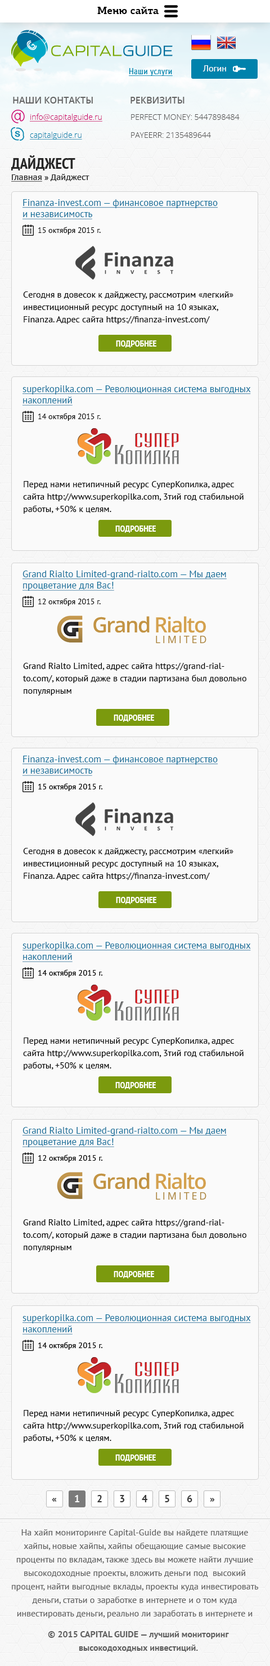
<style>
.page{position:relative;width:270px;height:1666px;background:#fafafa}
.page>*{position:absolute;margin:0}
.t1{font:10.1px "PFCentroSlabPro-Bold";color:#000000}
.t2{font:9px "PTSans-Regular";color:#ffffff}
.t3{font:9px "OpenSans-Semibold";color:#656565;text-transform:uppercase}
.t4{font:7.9px "OpenSans-Light";color:#cb0069;text-decoration:underline}
.t5{font:7.9px "OpenSans-Light";color:#545454}
.t6{font:7.9px "OpenSans-Light";color:#0082ac;text-decoration:underline}
.t7{font:15.2px "PTSans-NarrowBold";color:#262626;text-transform:uppercase}
.t8{font:7.9px "PTSans-Caption";color:#262626}
.t9{font:7.9px "PTSans-Caption";color:#262626;text-decoration:underline}
.t10{font:9.6px "PTSans-Regular";color:#0e6e9a;text-decoration:underline}
.t11{font:7.9px "PTSans-Regular";color:#000000}
.t12{font:9px/12.4px "PTSans-Regular";color:#000000}
.t13{font:9px "PTSans-NarrowBold";color:#ffffff;text-transform:uppercase}
.t14{font:10.1px "PTSans-Bold";color:#383838}
.t15{font:10.1px "PTSans-Bold";color:#ffffff}
.t16{font:9px/13.5px "PTSans-Regular";color:#616161}
.t17{font:9px/13.5px "PTSans-Bold";color:#616161}
</style>
<div class="page">
<p class="t1" style="left:97px;top:6px;width:62px;height:8px">Меню сайта</p>
<p class="t2" style="left:202px;top:65px;width:24px;height:6px">Логин</p>
<p class="t3" style="left:13px;top:97px;width:80px;height:7px">Наши контакты</p>
<p class="t3" style="left:130px;top:97px;width:54px;height:7px">Реквизиты</p>
<p class="t4" style="left:30px;top:114px;width:72px;height:8px">info@capitalguide.ru</p>
<p class="t5" style="left:131px;top:114px;width:109px;height:6px">PERFECT MONEY: 5447898484</p>
<p class="t6" style="left:30px;top:132px;width:52px;height:8px">capitalguide.ru</p>
<p class="t5" style="left:131px;top:132px;width:80px;height:6px">PAYEERR: 2135489644</p>
<p class="t7" style="left:11px;top:155px;width:64px;height:15px">Дайджест</p>
<p class="t8" style="left:11px;top:174px;width:78px;height:8px"><span class="t9">Главная</span> » Дайджест</p>
<p class="t10" style="left:22px;top:199px;width:196px;height:20px">Finanza-invest.com — финансовое партнерство<br>и независимость</p>
<p class="t11" style="left:38px;top:227px;width:63px;height:8px">15 октября 2015 г.</p>
<p class="t12" style="left:23px;top:291px;width:210px;height:33px">Cегодня в довесок к дайджесту, рассмотрим «легкий» инвестиционный ресурс доступный на 10 языках, Finanza. Адрес сайта https://finanza-invest.com/</p>
<p class="t13" style="left:116px;top:340px;width:40px;height:8px">подробнее</p>
<p class="t10" style="left:22px;top:385px;width:229px;height:21px">superkopilka.com — Революционная система выгодных<br>накоплений</p>
<p class="t11" style="left:38px;top:413px;width:63px;height:8px">14 октября 2015 г.</p>
<p class="t12" style="left:23px;top:481px;width:221px;height:33px">Перед нами нетипичный ресурс СуперКопилка, адрес сайта http://www.superkopilka.com, 3тий год стабильной работы, +50% к целям.</p>
<p class="t13" style="left:115px;top:525px;width:41px;height:8px">подробнее</p>
<p class="t10" style="left:22px;top:570px;width:205px;height:21px">Grand Rialto Limited-grand-rialto.com — Мы даем<br>процветание для Вас!</p>
<p class="t11" style="left:38px;top:598px;width:63px;height:8px">12 октября 2015 г.</p>
<p class="t12" style="left:23px;top:663px;width:223px;height:32px">Grand Rialto Limited, адрес сайта https://grand-rialto.com/, который даже в стадии партизана был довольно популярным</p>
<p class="t13" style="left:114px;top:714px;width:40px;height:8px">подробнее</p>
<p class="t14" style="left:52px;top:1497px;width:5px;height:4px">«</p>
<p class="t15" style="left:75px;top:1495px;width:4px;height:7px">1</p>
<p class="t14" style="left:97px;top:1495px;width:5px;height:7px">2</p>
<p class="t14" style="left:120px;top:1495px;width:4px;height:7px">3</p>
<p class="t14" style="left:142px;top:1495px;width:5px;height:7px">4</p>
<p class="t14" style="left:165px;top:1495px;width:4px;height:7px">5</p>
<p class="t14" style="left:187px;top:1495px;width:5px;height:7px">6</p>
<p class="t14" style="left:210px;top:1497px;width:5px;height:4px">»</p>
<p class="t16" style="left:12px;top:1529px;width:246px;height:89px;text-align:center">На хайп мониторинге Capital-Guide вы найдете платящие хайпы, новые хайпы, хайпы обещающие самые высокие проценты по вкладам, также здесь вы можете найти лучшие высокодоходные проекты, вложить деньги под  высокий процент, найти выгодные вклады, проекты куда инвестировать деньги, статьи о заработке в интернете и о том куда инвестировать деньги, реально ли заработать в интернете и куда лучше вложить деньги, как правильно вкладывать деньги, что такое финансовая пирамида и что такое хайп.</p>
<p class="t17" style="left:48px;top:1631px;width:181px;height:21px;text-align:center">© 2015 CAPITAL GUIDE — лучший мониторинг <br>высокодоходных инвестиций.</p>
</div>
